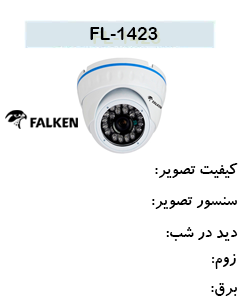
<style>
.page{position:relative;width:240px;height:300px;background:#ffffff}
.page>*{position:absolute;margin:0}
.t1{font:17.6px "ArialRoundedMTBold";color:#000000}
.t2{font:17.6px "BKoodakBold";color:#000000}
</style>
<div class="page">
<p class="t1" style="left:90px;top:27px;width:68px;height:13px">1423-FL</p>
<p class="t2" style="left:155px;top:163px;width:83px;height:15px">کیفیت تصویر:</p>
<p class="t2" style="left:152px;top:197px;width:85px;height:12px">سنسور تصویر:</p>
<p class="t2" style="left:166px;top:227px;width:72px;height:14px">دید در شب:</p>
<p class="t2" style="left:212px;top:254px;width:24px;height:15px">زوم:</p>
<p class="t2" style="left:211px;top:283px;width:26px;height:13px">برق:</p>
</div>
